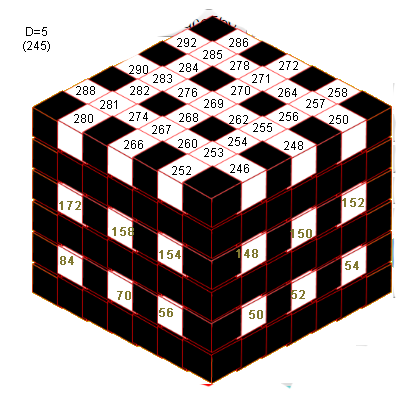
<style>
.page{position:relative;width:401px;height:412px;background:#ffffff}
.page>*{position:absolute;margin:0}
.t1{font:12px "ArialMT";color:#000000}
.t2{font:12px "ArialMT";color:#817931;font-weight:bold}
</style>
<div class="page">
<p class="t1" style="left:23px;top:27px;width:27px;height:25px;text-align:center">D=5<br>(245)</p>
<p class="t1" style="left:177px;top:38px;width:19px;height:9px">292</p>
<p class="t1" style="left:229px;top:38px;width:19px;height:9px">286</p>
<p class="t1" style="left:203px;top:50px;width:19px;height:9px">285</p>
<p class="t1" style="left:129px;top:65px;width:19px;height:9px">290</p>
<p class="t1" style="left:179px;top:63px;width:19px;height:9px">284</p>
<p class="t1" style="left:230px;top:61px;width:19px;height:9px">278</p>
<p class="t1" style="left:279px;top:61px;width:19px;height:9px">272</p>
<p class="t1" style="left:153px;top:74px;width:19px;height:9px">283</p>
<p class="t1" style="left:252px;top:74px;width:17px;height:9px">271</p>
<p class="t1" style="left:76px;top:86px;width:19px;height:9px">288</p>
<p class="t1" style="left:130px;top:86px;width:19px;height:9px">282</p>
<p class="t1" style="left:178px;top:88px;width:19px;height:9px">276</p>
<p class="t1" style="left:231px;top:86px;width:19px;height:9px">270</p>
<p class="t1" style="left:278px;top:88px;width:19px;height:9px">264</p>
<p class="t1" style="left:328px;top:88px;width:19px;height:9px">258</p>
<p class="t1" style="left:100px;top:100px;width:17px;height:9px">281</p>
<p class="t1" style="left:204px;top:99px;width:19px;height:9px">269</p>
<p class="t1" style="left:306px;top:99px;width:19px;height:9px">257</p>
<p class="t1" style="left:129px;top:112px;width:19px;height:9px">274</p>
<p class="t1" style="left:179px;top:113px;width:19px;height:9px">268</p>
<p class="t1" style="left:279px;top:112px;width:19px;height:9px">256</p>
<p class="t1" style="left:74px;top:114px;width:19px;height:9px">280</p>
<p class="t1" style="left:152px;top:125px;width:19px;height:9px">267</p>
<p class="t1" style="left:229px;top:115px;width:19px;height:9px">262</p>
<p class="t1" style="left:253px;top:123px;width:19px;height:9px">255</p>
<p class="t1" style="left:329px;top:115px;width:19px;height:9px">250</p>
<p class="t1" style="left:228px;top:137px;width:19px;height:9px">254</p>
<p class="t1" style="left:124px;top:140px;width:19px;height:9px">266</p>
<p class="t1" style="left:178px;top:139px;width:19px;height:9px">260</p>
<p class="t1" style="left:204px;top:148px;width:19px;height:9px">253</p>
<p class="t1" style="left:284px;top:141px;width:19px;height:9px">248</p>
<p class="t1" style="left:172px;top:166px;width:19px;height:9px">252</p>
<p class="t1" style="left:230px;top:164px;width:19px;height:9px">246</p>
<p class="t2" style="left:342px;top:198px;width:22px;height:9px">152</p>
<p class="t2" style="left:59px;top:201px;width:22px;height:9px">172</p>
<p class="t2" style="left:112px;top:227px;width:22px;height:9px">158</p>
<p class="t2" style="left:290px;top:229px;width:22px;height:9px">150</p>
<p class="t2" style="left:60px;top:256px;width:14px;height:9px">84</p>
<p class="t2" style="left:159px;top:250px;width:22px;height:9px">154</p>
<p class="t2" style="left:236px;top:249px;width:22px;height:9px">148</p>
<p class="t2" style="left:345px;top:261px;width:14px;height:9px">54</p>
<p class="t2" style="left:117px;top:291px;width:14px;height:9px">70</p>
<p class="t2" style="left:291px;top:290px;width:14px;height:9px">52</p>
<p class="t2" style="left:159px;top:308px;width:14px;height:9px">56</p>
<p class="t2" style="left:249px;top:310px;width:14px;height:9px">50</p>
</div>
